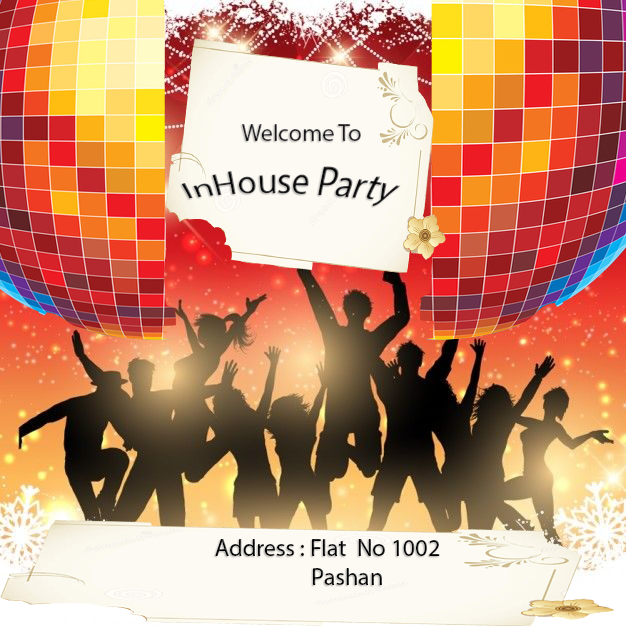
<style>
.page{position:relative;width:626px;height:626px}
.page>*{position:absolute;margin:0}
.t1{font:24px "MyriadPro-Regular"}
.t2{font:30px "MyriadPro-Regular"}
</style>
<div class="page">
<p class="t1" style="left:242px;top:124px;width:119px;height:17px">Welcome To</p>
<p class="t2" style="left:181px;top:166px;width:220px;height:41px">InHouse Party</p>
<p class="t1" style="left:215px;top:539px;width:225px;height:46px">Address : Flat  No 1002<br>                   Pashan</p>
</div>
